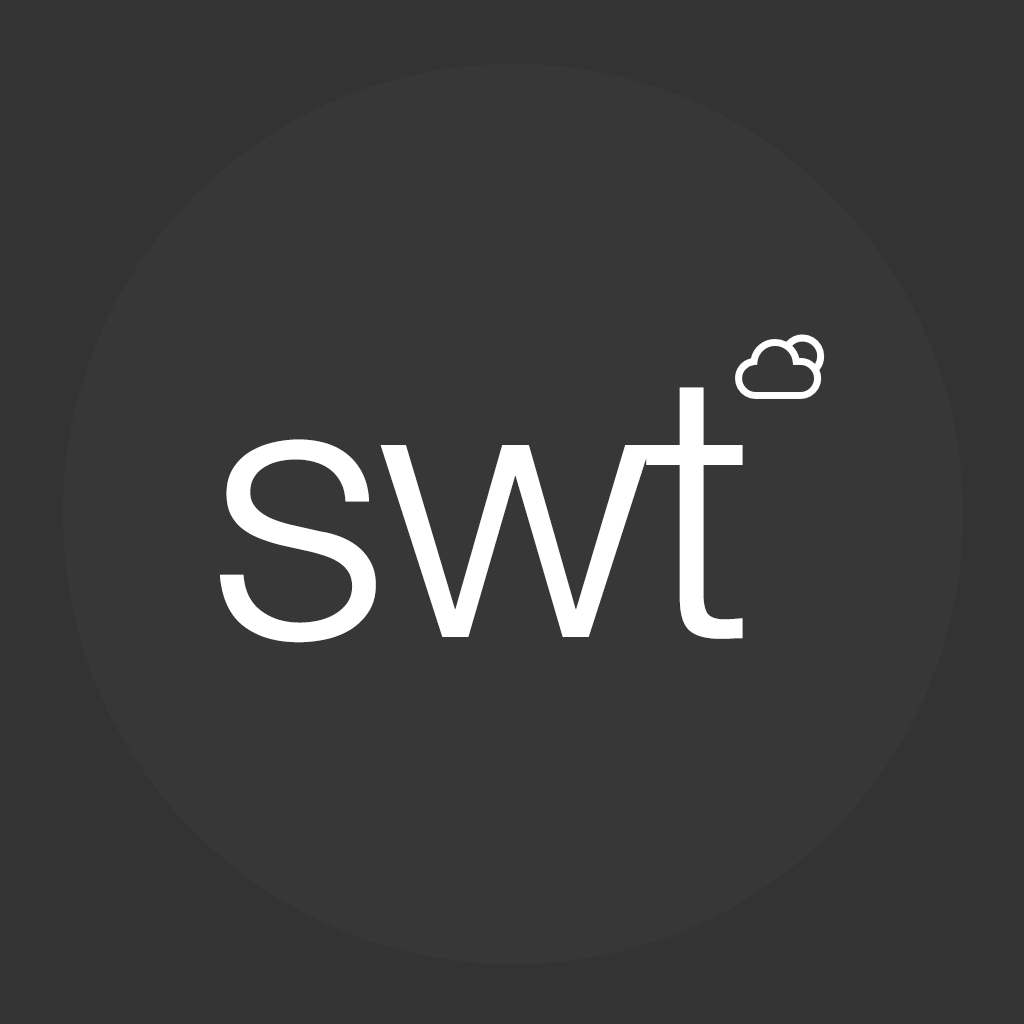
<style>
.page{position:relative;width:1024px;height:1024px;background:#373737}
.page>*{position:absolute;margin:0}
.t1{font:371.5px "HelveticaNeue-Light";letter-spacing:-0.025em;color:#ffffff}
</style>
<div class="page">
<p class="t1" style="left:219px;top:387px;width:524px;height:256px">swt</p>
</div>
